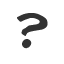
<style>
.page{position:relative;width:64px;height:64px;background:#ffffff}
.page>*{position:absolute;margin:0}
.t1{font:48.4px "ComicBook";color:#333333}
</style>
<div class="page">
<p class="t1" style="left:17px;top:13px;width:31px;height:36px">?</p>
</div>
